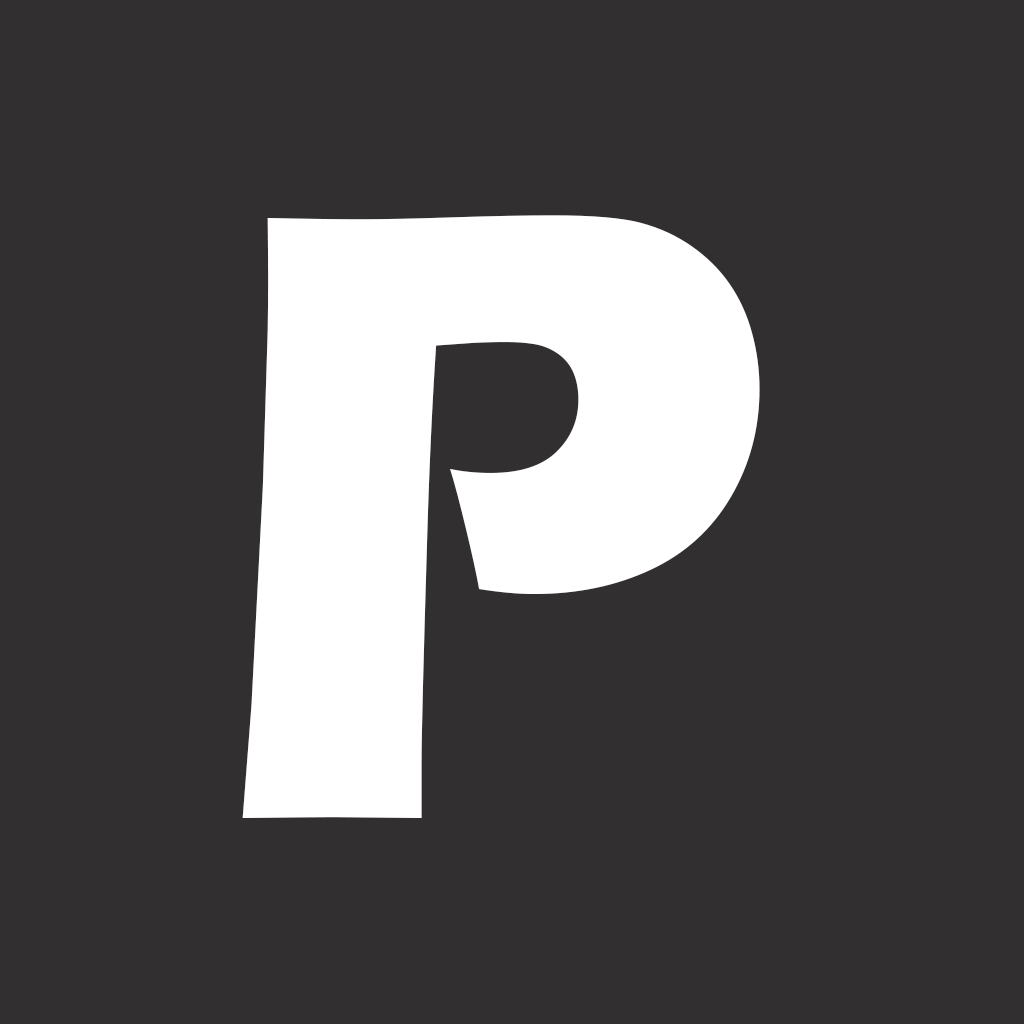
<style>
.page{position:relative;width:1024px;height:1024px;background:#312f2f}
.page>*{position:absolute;margin:0}
.t1{font:900px "ErasITC-Bold";color:#ffffff}
</style>
<div class="page">
<p class="t1" style="left:242px;top:215px;width:518px;height:603px">P</p>
</div>
